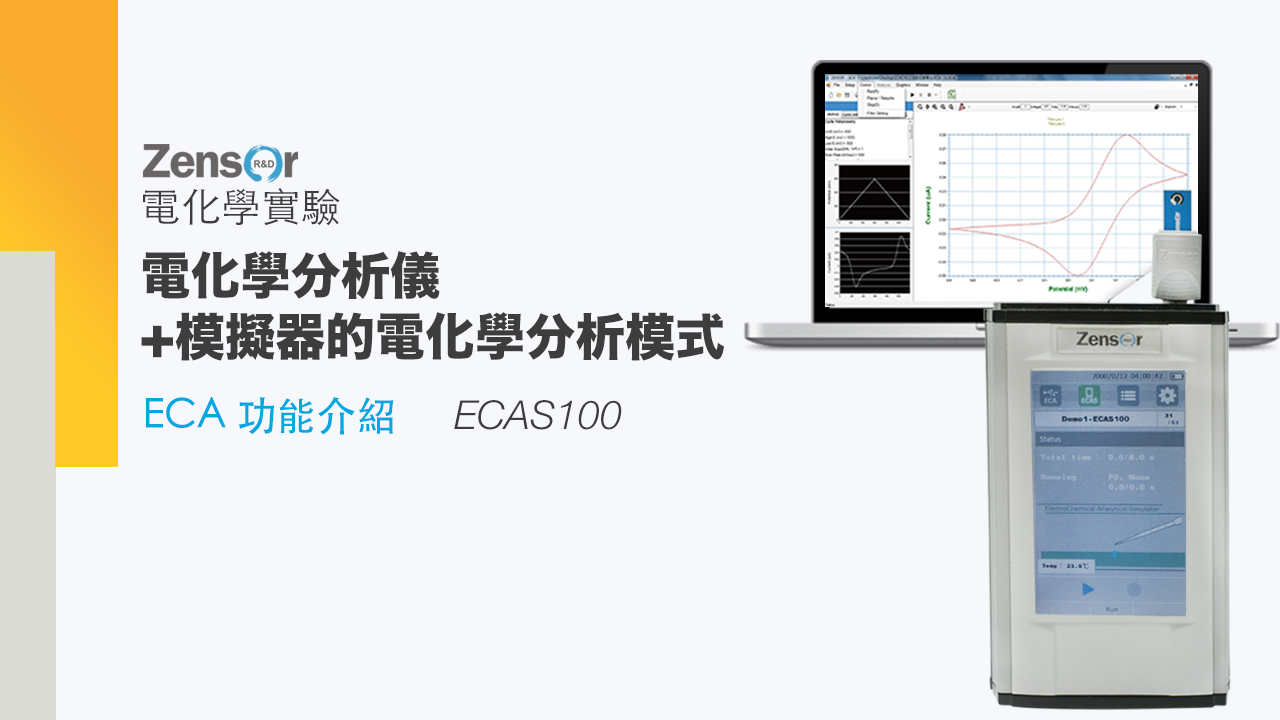
<style>
.page{position:relative;width:1280px;height:720px;background:#f7f8fc}
.page>*{position:absolute;margin:0}
.t1{font:40px "STHeitiTC-Light";color:#3d3d3d}
.t2{font:50px "HiraKakuStd-W8";color:#3d3d3d}
.t3{font:40px "STHeitiTC-Medium";color:#00a7e1}
.t4{font:40px "HelveticaNeueLTPro-LtIt";color:#3d3d3d}
</style>
<div class="page">
<p class="t1" style="left:143px;top:188px;width:197px;height:38px">電化學實驗</p>
<p class="t2" style="left:142px;top:251px;width:298px;height:49px">電化學分析儀</p>
<p class="t2" style="left:141px;top:312px;width:583px;height:49px">+模擬器的電化學分析模式</p>
<p class="t3" style="left:146px;top:397px;width:248px;height:38px">ECA 功能介紹</p>
<p class="t4" style="left:454px;top:400px;width:168px;height:30px">ECAS100</p>
</div>
